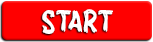
<style>
.page{position:relative;width:153px;height:42px;background:#ff0000}
.page>*{position:absolute;margin:0}
.t1{font:30px "fFrogToad";color:#ffffff;text-transform:uppercase}
</style>
<div class="page">
<p class="t1" style="left:42px;top:9px;width:71px;height:25px">Start</p>
</div>
